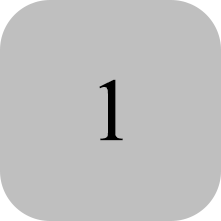
<style>
.page{position:relative;width:221px;height:221px;background:#bfbfbf}
.page>*{position:absolute;margin:0}
.t1{font:89.4px "TimesNewRomanPSMT";color:#000000}
</style>
<div class="page">
<p class="t1" style="left:99px;top:79px;width:24px;height:62px">1</p>
</div>
